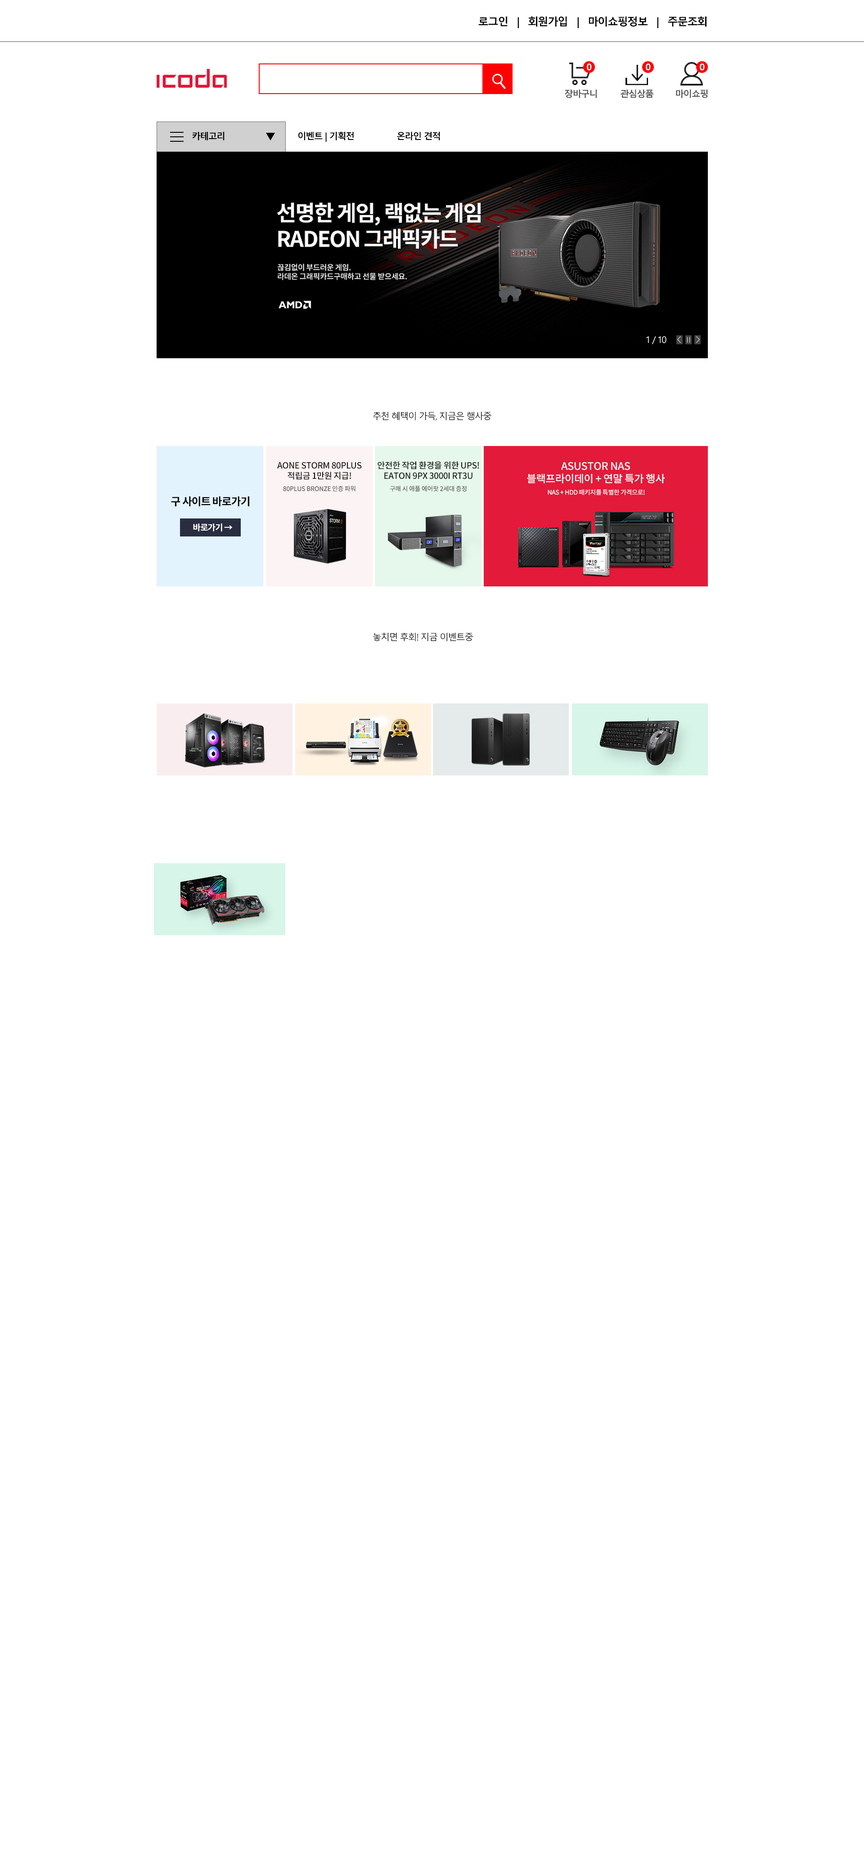
<style>
.page{position:relative;width:864px;height:1874px;background:#ffffff}
.page>*{position:absolute;margin:0}
.t1{font:10.8px "MalgunGothicBold";letter-spacing:-0.08em;color:#000000}
.t2{font:9px "MalgunGothicBold";letter-spacing:-0.08em;color:#ffffff}
.t3{font:9.1px "MalgunGothicBold";letter-spacing:-0.08em;color:#ffffff}
.t4{font:9px "MalgunGothicBold";letter-spacing:-0.08em;color:#545454}
.t5{font:9px "MalgunGothicBold";letter-spacing:-0.08em;color:#000000}
.t6{font:9px "MalgunGothic";letter-spacing:-0.08em;color:#ffffff}
.t7{font:9px "MalgunGothic";letter-spacing:-0.08em;color:#000000}
</style>
<div class="page">
<p class="t1" style="left:478px;top:16px;width:228px;height:12px">로그인   |   회원가입   |   마이쇼핑정보   |   주문조회</p>
<p class="t2" style="left:587px;top:63px;width:5px;height:8px">0</p>
<p class="t3" style="left:646px;top:63px;width:5px;height:8px">0</p>
<p class="t3" style="left:700px;top:63px;width:5px;height:8px">0</p>
<p class="t4" style="left:565px;top:90px;width:32px;height:8px">장바구니</p>
<p class="t4" style="left:621px;top:90px;width:32px;height:8px">관심상품</p>
<p class="t4" style="left:676px;top:89px;width:32px;height:9px">마이쇼핑</p>
<p class="t5" style="left:192px;top:131px;width:33px;height:9px">카테고리</p>
<p class="t5" style="left:298px;top:131px;width:56px;height:11px">이벤트 | 기획전</p>
<p class="t5" style="left:397px;top:131px;width:43px;height:9px">온라인 견적</p>
<p class="t6" style="left:646px;top:336px;width:20px;height:8px">1 / 10</p>
<p class="t7" style="left:373px;top:412px;width:118px;height:9px">추천 혜택이 가득, 지금은 행사중</p>
<p class="t7" style="left:373px;top:632px;width:100px;height:9px">놓치면 후회! 지금 이벤트중</p>
</div>
